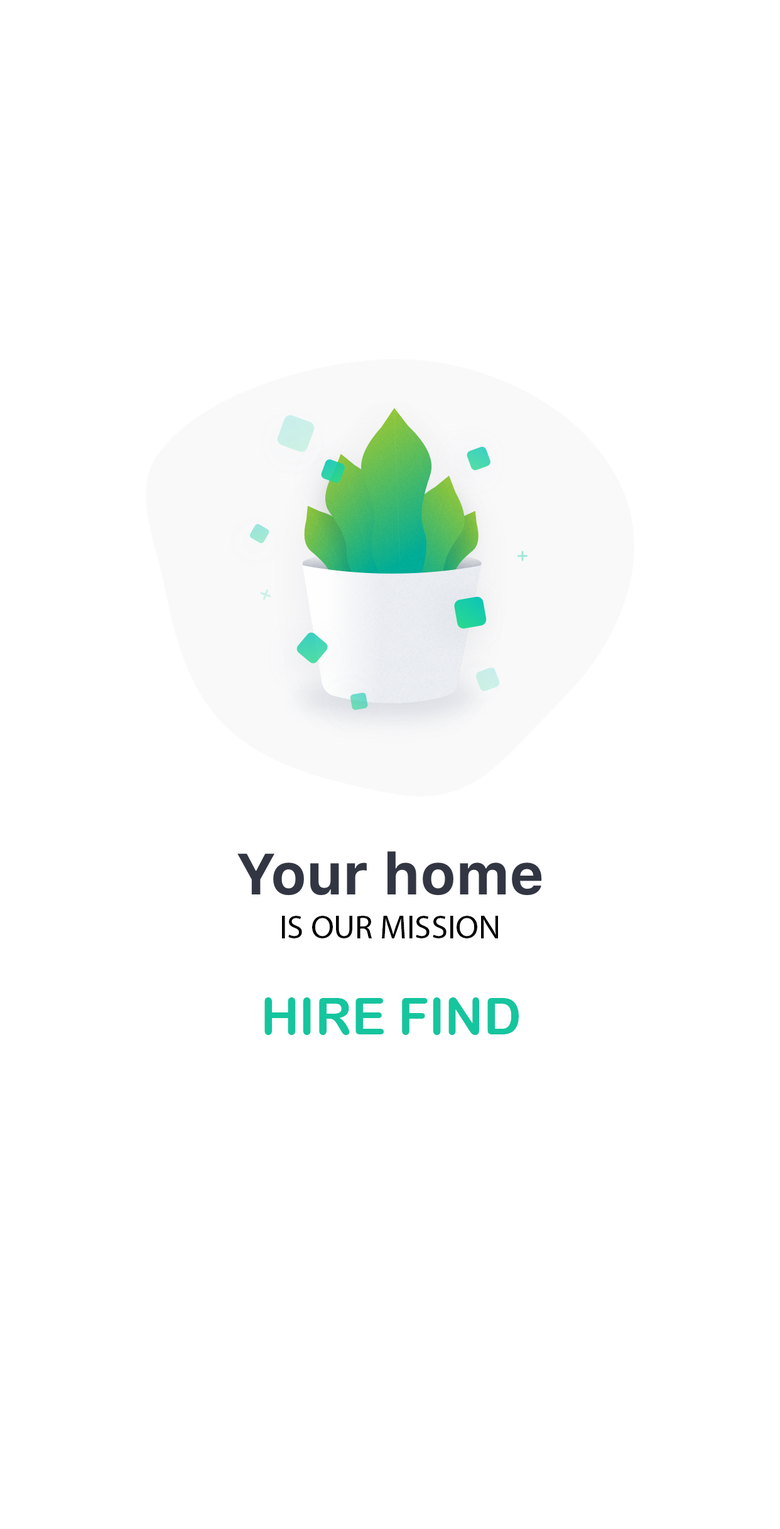
<style>
.page{position:relative;width:780px;height:1529px;background:#ffffff}
.page>*{position:absolute;margin:0}
.t1{font:33.3px "MyriadPro-Regular";color:#000000}
.t2{font:50.9px "ArialRoundedMTBold";color:#15c59e}
</style>
<div class="page">
<p class="t1" style="left:282px;top:916px;width:216px;height:23px">IS OUR MISSION</p>
<p class="t2" style="left:264px;top:998px;width:255px;height:37px">HIRE FIND</p>
</div>
